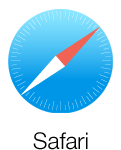
<style>
.page{position:relative;width:121px;height:150px;background:#ffffff}
.page>*{position:absolute;margin:0}
.t1{font:23px "HelveticaNeue-Light";color:#000000}
</style>
<div class="page">
<p class="t1" style="left:33px;top:132px;width:55px;height:18px">Safari</p>
</div>
